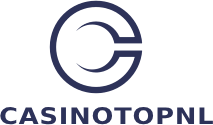
<style>
.page{position:relative;width:213px;height:125px;background:#ffffff}
.page>*{position:absolute;margin:0}
.t1{font:30px "DejaVuSans-Bold";letter-spacing:0.026em;color:#2d3259;font-variant:small-caps;scale:1.13 1}
</style>
<div class="page">
<p class="t1" style="left:0px;top:107px;width:213px;height:18px">casinotopnl</p>
</div>
